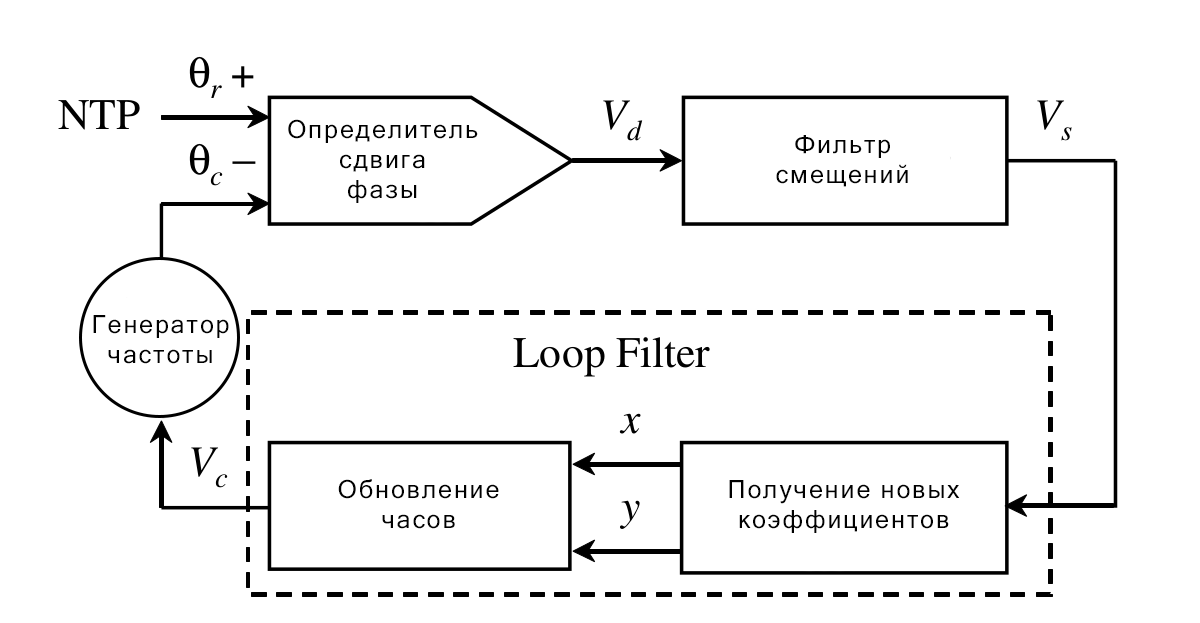
<style>
.page{position:relative;width:1200px;height:623px;background:#ffffff}
.page>*{position:absolute;margin:0}
.t1{font:25px "MicrosoftSansSerif";letter-spacing:0.075em;color:#000000}
</style>
<div class="page">
<p class="t1" style="left:288px;top:119px;width:190px;height:84px;text-align:center">Определитель<br>сдвига<br>фазы</p>
<p class="t1" style="left:776px;top:135px;width:132px;height:52px;text-align:center">Фильтр<br>смещений</p>
<p class="t1" style="left:93px;top:315px;width:136px;height:49px;text-align:center">Генератор<br>частоты</p>
<p class="t1" style="left:338px;top:479px;width:161px;height:50px;text-align:center">Обновление<br>часов</p>
<p class="t1" style="left:729px;top:480px;width:231px;height:53px;text-align:center">Получение новых<br>коэффициентов</p>
</div>
